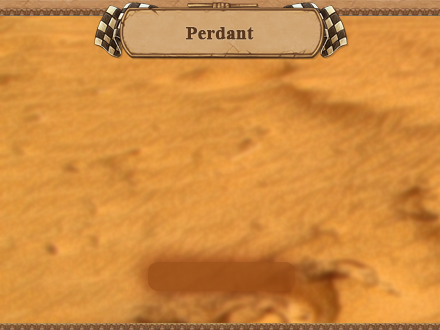
<style>
.page{position:relative;width:440px;height:330px}
.page>*{position:absolute;margin:0}
.t1{font:18.7px "TimesNewRomanPS-BoldMT";color:#593619;font-weight:bold}
</style>
<div class="page">
<p class="t1" style="left:186px;top:27px;width:68px;height:13px">Perdant</p>
</div>
